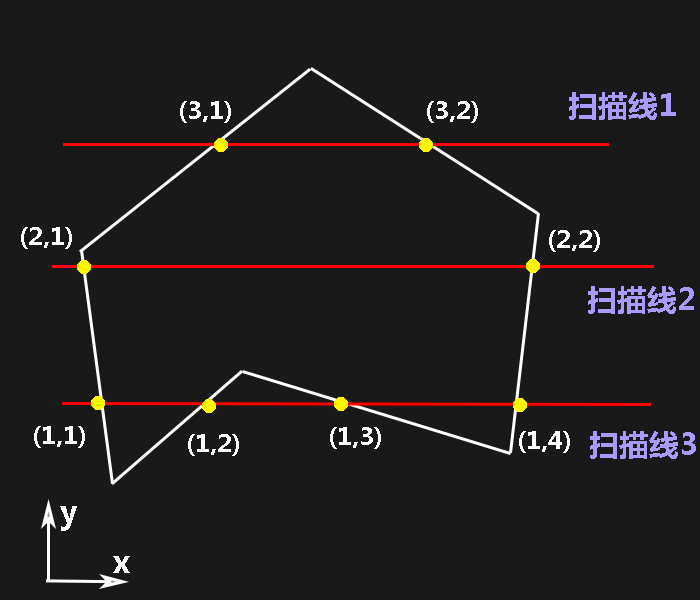
<style>
.page{position:relative;width:700px;height:600px;background:#191919}
.page>*{position:absolute;margin:0}
.t1{font:24px "MicrosoftYaHei-Bold";color:#ffffff}
.t2{font:30px "MicrosoftYaHei-Bold";color:#a89aff}
.t3{font:30px "MicrosoftYaHei-Bold";color:#ffffff}
</style>
<div class="page">
<p class="t1" style="left:180px;top:101px;width:51px;height:22px">(3,1)</p>
<p class="t1" style="left:427px;top:101px;width:51px;height:22px">(3,2)</p>
<p class="t2" style="left:569px;top:92px;width:107px;height:28px">扫描线1</p>
<p class="t1" style="left:21px;top:227px;width:51px;height:22px">(2,1)</p>
<p class="t1" style="left:549px;top:230px;width:51px;height:22px">(2,2)</p>
<p class="t2" style="left:588px;top:286px;width:106px;height:28px">扫描线2</p>
<p class="t1" style="left:34px;top:426px;width:51px;height:22px">(1,1)</p>
<p class="t1" style="left:188px;top:434px;width:51px;height:22px">(1,2)</p>
<p class="t1" style="left:330px;top:427px;width:51px;height:22px">(1,3)</p>
<p class="t1" style="left:519px;top:431px;width:51px;height:22px">(1,4)</p>
<p class="t2" style="left:590px;top:431px;width:106px;height:28px">扫描线3</p>
<p class="t3" style="left:60px;top:506px;width:17px;height:25px">y</p>
<p class="t3" style="left:113px;top:556px;width:17px;height:17px">x</p>
</div>
